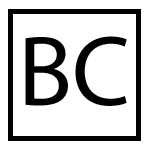
<style>
.page{position:relative;width:150px;height:150px;background:#ffffff}
.page>*{position:absolute;margin:0}
.t1{font:100px "MyriadPro-Regular";color:#000000}
</style>
<div class="page">
<p class="t1" style="left:25px;top:36px;width:102px;height:70px">BC</p>
</div>
